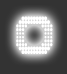
<style>
.page{position:relative;width:67px;height:74px;background:#333333}
.page>*{position:absolute;margin:0}
.t1{font:60px "The-2K12";color:#ffffff;scale:0.75 1}
</style>
<div class="page">
<p class="t1" style="left:16px;top:16px;width:37px;height:38px">0</p>
</div>
